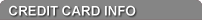
<style>
.page{position:relative;width:202px;height:20px;background:#858585}
.page>*{position:absolute;margin:0}
.t1{font:13.3px "Arial-BoldMT";color:#ffffff}
</style>
<div class="page">
<p class="t1" style="left:9px;top:5px;width:127px;height:11px">CREDIT CARD INFO</p>
</div>
